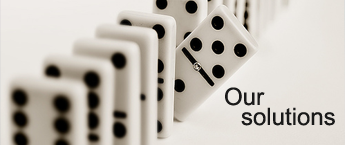
<style>
.page{position:relative;width:345px;height:145px}
.page>*{position:absolute;margin:0}
.t1{font:24px "ArialMT";color:#191919}
</style>
<div class="page">
<p class="t1" style="left:225px;top:87px;width:40px;height:19px">Our</p>
<p class="t1" style="left:241px;top:107px;width:94px;height:19px">solutions</p>
</div>
